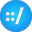
<style>
.page{position:relative;width:32px;height:32px}
.page>*{position:absolute;margin:0}
.t1{font:15.1px "SFMono-Heavy";letter-spacing:-0.3em;color:#ffffff}
.t2{font:15.1px "SFMono-Heavy";letter-spacing:-0.26em;color:#ffffff}
.t3{font:17.6px "SFMono-Heavy";letter-spacing:-0.3em;color:#ffffff}
</style>
<div class="page">
<p class="t1" style="left:5px;top:12px;width:10px;height:10px">:<span class="t2">:</span></p>
<p class="t3" style="left:15px;top:7px;width:9px;height:18px;opacity:0.88">/</p>
</div>
